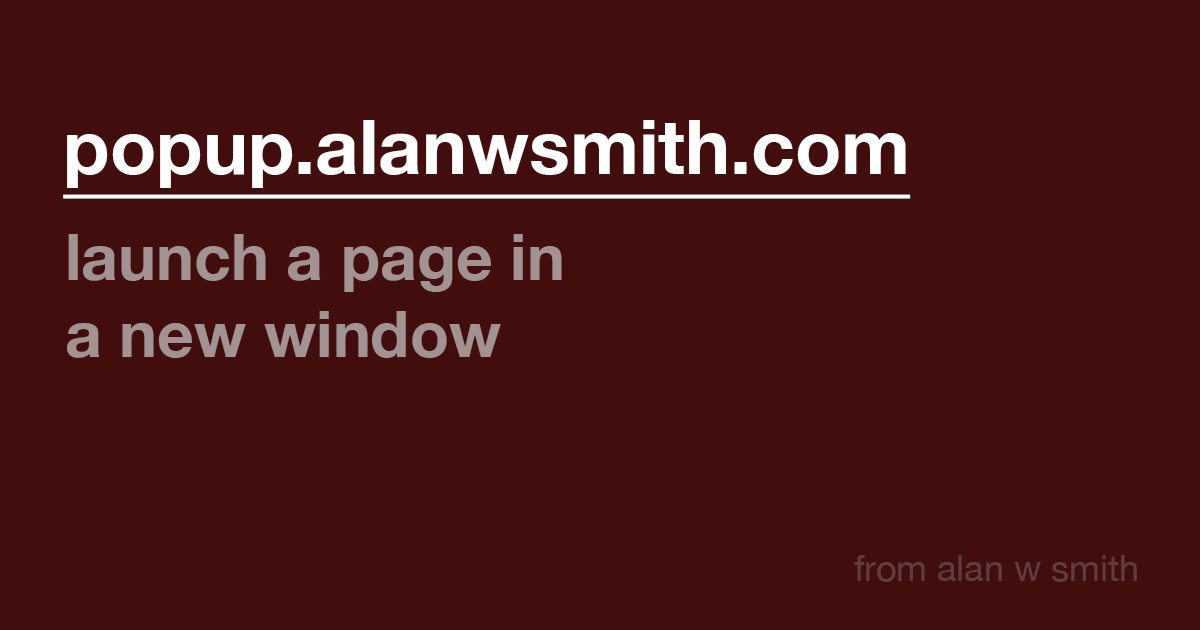
<style>
.page{position:relative;width:1200px;height:630px;background:#420d0d}
.page>*{position:absolute;margin:0}
.t1{font:76px "HelveticaNeue-Bold";color:#ffffff;text-decoration:underline}
.t2{font:64px "HelveticaNeue-Bold";color:#a39292}
.t3{font:36px "HelveticaNeue";color:#613d3d}
</style>
<div class="page">
<p class="t1" style="left:63px;top:120px;width:848px;height:79px">popup.alanwsmith.com</p>
<p class="t2" style="left:67px;top:234px;width:495px;height:124px">launch a page in<br>a new window</p>
<p class="t3" style="left:854px;top:555px;width:283px;height:27px">from alan w smith</p>
</div>
